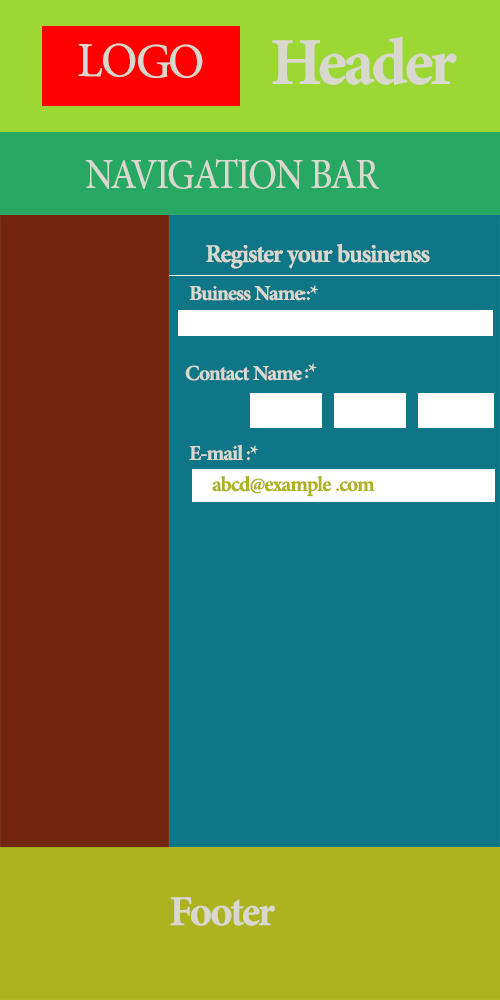
<style>
.page{position:relative;width:500px;height:1000px;background:#0e7686}
.page>*{position:absolute;margin:0}
.t1{font:94px "AdobeArabic-Bold";letter-spacing:-0.035em;color:#d8d8ce;scale:0.96 1}
.t2{font:69px "AdobeArabic-Regular";letter-spacing:-0.035em;color:#d8d8ce;scale:0.94 1}
.t3{font:58.9px "AdobeArabic-Regular";letter-spacing:-0.035em;color:#d8d8ce;scale:0.87 1}
.t4{font:36px "AdobeArabic-Bold";letter-spacing:-0.035em;color:#d8d8ce;scale:0.96 1}
.t5{font:30px "AdobeArabic-Bold";letter-spacing:-0.035em;color:#d8d8ce;scale:0.96 1}
.t6{font:30px "AdobeArabic-Bold";letter-spacing:-0.035em;color:#adb21f;scale:0.96 1}
.t7{font:60px "AdobeArabic-Bold";letter-spacing:-0.035em;color:#d8d8ce;scale:0.96 1}
</style>
<div class="page">
<p class="t1" style="left:272px;top:36px;width:185px;height:49px">Header</p>
<p class="t2" style="left:78px;top:43px;width:125px;height:35px;rotate:1deg">LOGO</p>
<p class="t3" style="left:85px;top:159px;width:294px;height:30px">NAVIGATION BAR</p>
<p class="t4" style="left:206px;top:243px;width:224px;height:26px">Register your businenss</p>
<p class="t5" style="left:189px;top:285px;width:129px;height:16px">*::Buiness Name</p>
<p class="t5" style="left:185px;top:365px;width:117px;height:16px">Contact Name</p>
<p class="t5" style="left:305px;top:363px;width:12px;height:16px">*:</p>
<p class="t5" style="left:189px;top:444px;width:69px;height:17px">*: E-mail</p>
<p class="t6" style="left:212px;top:475px;width:163px;height:22px">abcd@example .com</p>
<p class="t7" style="left:170px;top:897px;width:105px;height:29px">Footer</p>
</div>
